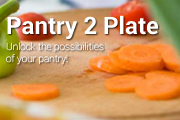
<style>
.page{position:relative;width:180px;height:120px}
.page>*{position:absolute;margin:0}
.t1{font:10px "Roboto-Thin";color:#ffffff}
.t2{font:24px "Roboto-Bold";color:#ffffff}
</style>
<div class="page">
<p class="t1" style="left:6px;top:15px;width:152px;height:50px"><span class="t2">Pantry 2 Plate<br><br></span>Unlock the possibilities<br>of your pantry!</p>
</div>
